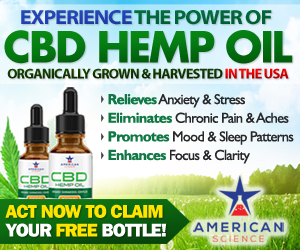
<style>
.page{position:relative;width:300px;height:250px}
.page>*{position:absolute;margin:0}
.t1{font:20.5px "MyriadPro-BoldSemiExt";letter-spacing:-0.05em;color:#02683a;text-transform:uppercase}
.t2{font:20.5px "MyriadPro-BoldSemiExt";letter-spacing:-0.05em;color:#233fb4;text-transform:uppercase}
.t3{font:41.7px "FuturaLT-Bold";letter-spacing:-0.05em;color:#037812}
.t4{font:14.1px "MyriadPro-Bold";letter-spacing:-0.05em;color:#103101;text-transform:uppercase}
.t5{font:14.1px "MyriadPro-Bold";letter-spacing:-0.05em;color:#fe0000;text-transform:uppercase}
.t6{font:14.6px/18.6px "GillSansMT";letter-spacing:-0.05em;color:#27282a}
.t7{font:14.6px/18.6px "GillSansMT-Bold";letter-spacing:-0.05em;color:#107745}
.t8{font:18.6px/18.6px "FranklinGothicLT-Heavy";letter-spacing:-0.05em;color:#ffe400;text-transform:uppercase}
.t9{font:18.6px/18.6px "FranklinGothicLT-Heavy";letter-spacing:-0.05em;color:#ffffff;text-transform:uppercase}
</style>
<div class="page">
<p class="t1" style="left:21px;top:10px;width:251px;height:15px"><span class="t2">Experience </span>The Power Of</p>
<p class="t3" style="left:4px;top:30px;width:289px;height:34px">CBD HEMP OIL</p>
<p class="t4" style="left:7px;top:68px;width:282px;height:11px">Organically Grown &amp; Harvested <span class="t5">In The USA</span></p>
<p class="t6" style="left:108px;top:94px;width:186px;height:70px"><span class="t7">Relieves </span>Anxiety &amp; Stress<br><span class="t7">Eliminates </span>Chronic Pain &amp; Aches<br><span class="t7">Promotes </span>Mood &amp; Sleep Patterns<br><span class="t7">Enhances </span>Focus &amp; Clarity</p>
<p class="t8" style="left:5px;top:204px;width:162px;height:33px">Act Now To Claim <br><span class="t9">Your </span>Free<span class="t9"> Bottle!</span></p>
</div>
